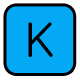
<style>
.page{position:relative;width:80px;height:80px;background:#03a9f4}
.page>*{position:absolute;margin:0}
.t1{font:48px "NanumSquareRoundR";color:#000000}
</style>
<div class="page">
<p class="t1" style="left:28px;top:22px;width:25px;height:35px">K</p>
</div>
